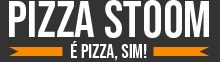
<style>
.page{position:relative;width:220px;height:62px;background:#333333}
.page>*{position:absolute;margin:0}
.t1{font:52px "BebasNeue-Regular";color:#ffffff}
.t2{font:19.7px "BebasNeue-Regular";color:#ffffff}
</style>
<div class="page">
<p class="t1" style="left:9px;top:0px;width:200px;height:38px">PIZZA STOOM</p>
<p class="t2" style="left:71px;top:41px;width:76px;height:20px">é pizza, sim!</p>
</div>
